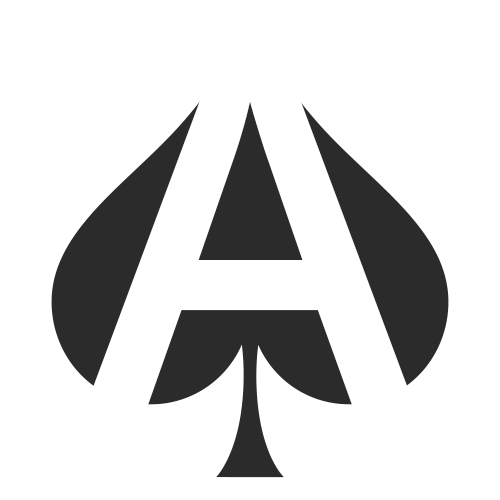
<style>
.page{position:relative;width:500px;height:500px;background:#ffffff}
.page>*{position:absolute;margin:0}
.t1{font:500px "OpenSans-Semibold";color:#ffffff}
</style>
<div class="page">
<p class="t1" style="left:85px;top:51px;width:331px;height:358px">A</p>
</div>
